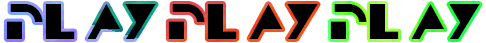
<style>
.page{position:relative;width:486px;height:43px;background:#ffffff}
.page>*{position:absolute;margin:0}
.t1{font:36px "TRON";color:#000000}
</style>
<div class="page">
<p class="t1" style="left:6px;top:4px;width:150px;height:35px">Play</p>
<p class="t1" style="left:168px;top:4px;width:150px;height:35px">Play</p>
<p class="t1" style="left:330px;top:4px;width:150px;height:35px">Play</p>
</div>
